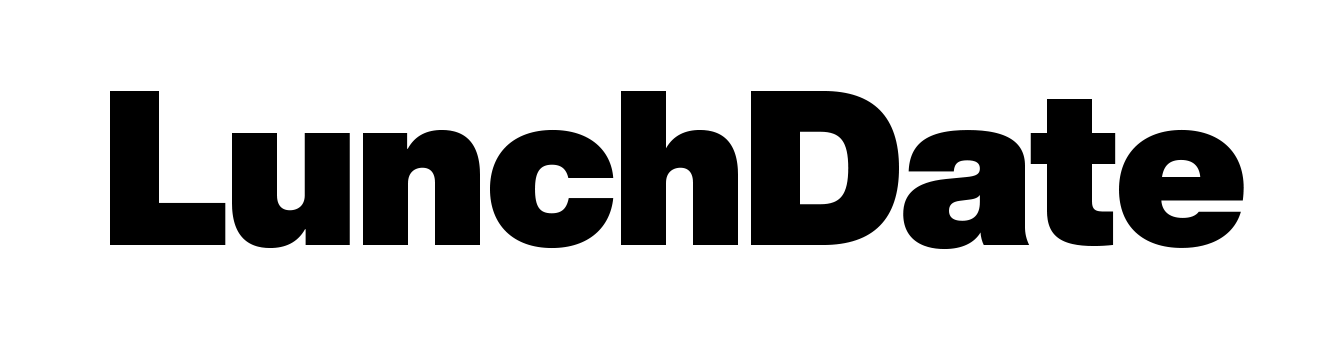
<style>
.page{position:relative;width:1324px;height:338px;background:#ffffff}
.page>*{position:absolute;margin:0}
.t1{font:216.7px "HelveticaNowDisplay-XBlk";letter-spacing:-0.01em;color:#000000}
</style>
<div class="page">
<p class="t1" style="left:110px;top:91px;width:1134px;height:159px">LunchDate</p>
</div>
